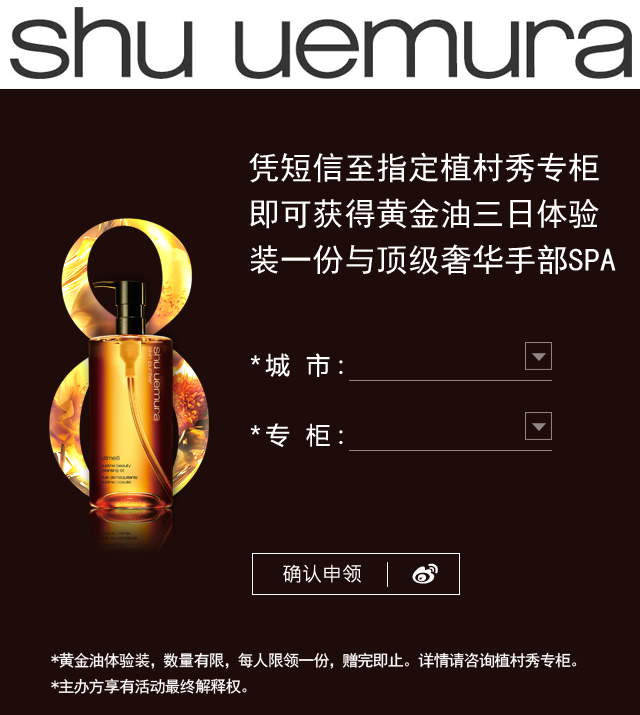
<style>
.page{position:relative;width:640px;height:715px;background:#1e0c0a}
.page>*{position:absolute;margin:0}
.t1{font:32px/46px "SimHei";color:#ffffff}
.t2{font:24px/70px "MicrosoftYaHei";letter-spacing:-0.05em;color:#ffffff}
.t3{font:20px "MicrosoftJhengHeiRegular";color:#ffffff}
.t4{font:16px/26px "SimHei";letter-spacing:-0.05em;color:#ffffff}
.t5{font:16px/20px "SimHei";letter-spacing:-0.05em;color:#ffffff}
</style>
<div class="page">
<p class="t1" style="left:249px;top:152px;width:367px;height:123px">凭短信至指定植村秀专柜<br>即可获得黄金油三日体验装一份与顶级奢华手部SPA</p>
<p class="t2" style="left:250px;top:353px;width:93px;height:94px">* 城   市：<br>* 专   柜：</p>
<p class="t3" style="left:283px;top:564px;width:78px;height:19px">确认申领</p>
<p class="t4" style="left:51px;top:652px;width:526px;height:42px">*黄金油体验装，数量有限，每人限领一份，赠完即止。<span class="t5">详情请咨询植村秀专柜</span>。<br>*主办方享有活动最终解释权。</p>
</div>
